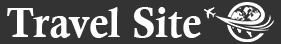
<style>
.page{position:relative;width:281px;height:44px;background:#333333}
.page>*{position:absolute;margin:0}
.t1{font:42px "CalisMTBol";color:#fefefe}
</style>
<div class="page">
<p class="t1" style="left:7px;top:7px;width:194px;height:31px">Travel Site</p>
</div>
